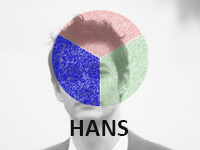
<style>
.page{position:relative;width:200px;height:150px}
.page>*{position:absolute;margin:0}
.t1{font:25.3px "Calibri-Bold";color:#111111}
</style>
<div class="page">
<p class="t1" style="left:70px;top:120px;width:59px;height:16px">HANS</p>
</div>
